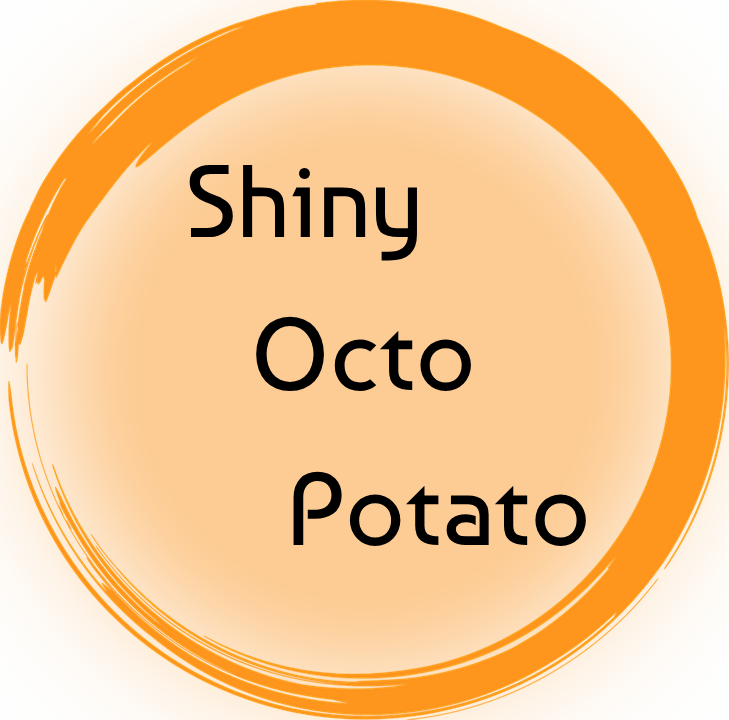
<style>
.page{position:relative;width:729px;height:720px;background:#fdcc94}
.page>*{position:absolute;margin:0}
.t1{font:103px "Baumans-Regular";color:#000000}
</style>
<div class="page">
<p class="t1" style="left:189px;top:164px;width:228px;height:97px">Shiny</p>
<p class="t1" style="left:256px;top:316px;width:215px;height:76px">Octo</p>
<p class="t1" style="left:293px;top:471px;width:293px;height:75px">Potato</p>
</div>
